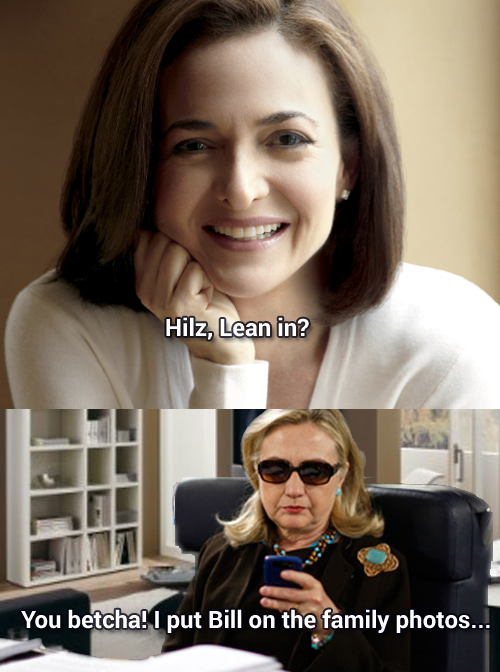
<style>
.page{position:relative;width:500px;height:672px}
.page>*{position:absolute;margin:0}
.t1{font:24px "Roboto-Bold";color:#ffffff}
</style>
<div class="page">
<p class="t1" style="left:166px;top:317px;width:143px;height:23px">Hilz, Lean in?</p>
<p class="t1" style="left:21px;top:609px;width:469px;height:24px">You betcha! I put Bill on the family photos...</p>
</div>
